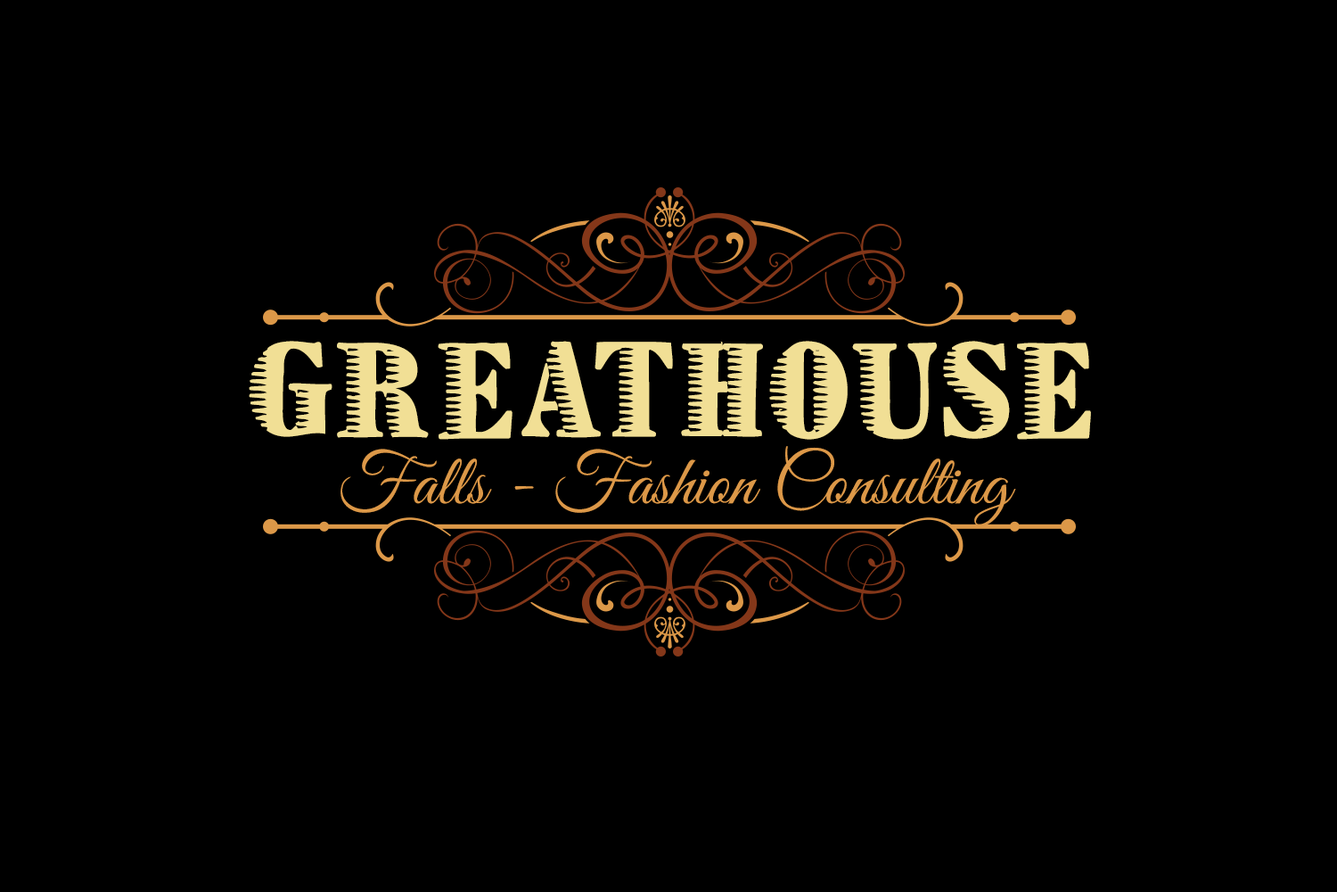
<style>
.page{position:relative;width:1337px;height:892px;background:#000000}
.page>*{position:absolute;margin:0}
.t1{font:97.6px "Zebraesq";letter-spacing:0.05em;color:#f1df95;text-transform:uppercase}
.t2{font:71.4px "GreatVibes-Regular";color:#dc9848}
</style>
<div class="page">
<p class="t1" style="left:249px;top:341px;width:842px;height:99px">Greathouse</p>
<p class="t2" style="left:341px;top:446px;width:675px;height:80px">Falls - Fashion Consulting</p>
</div>
